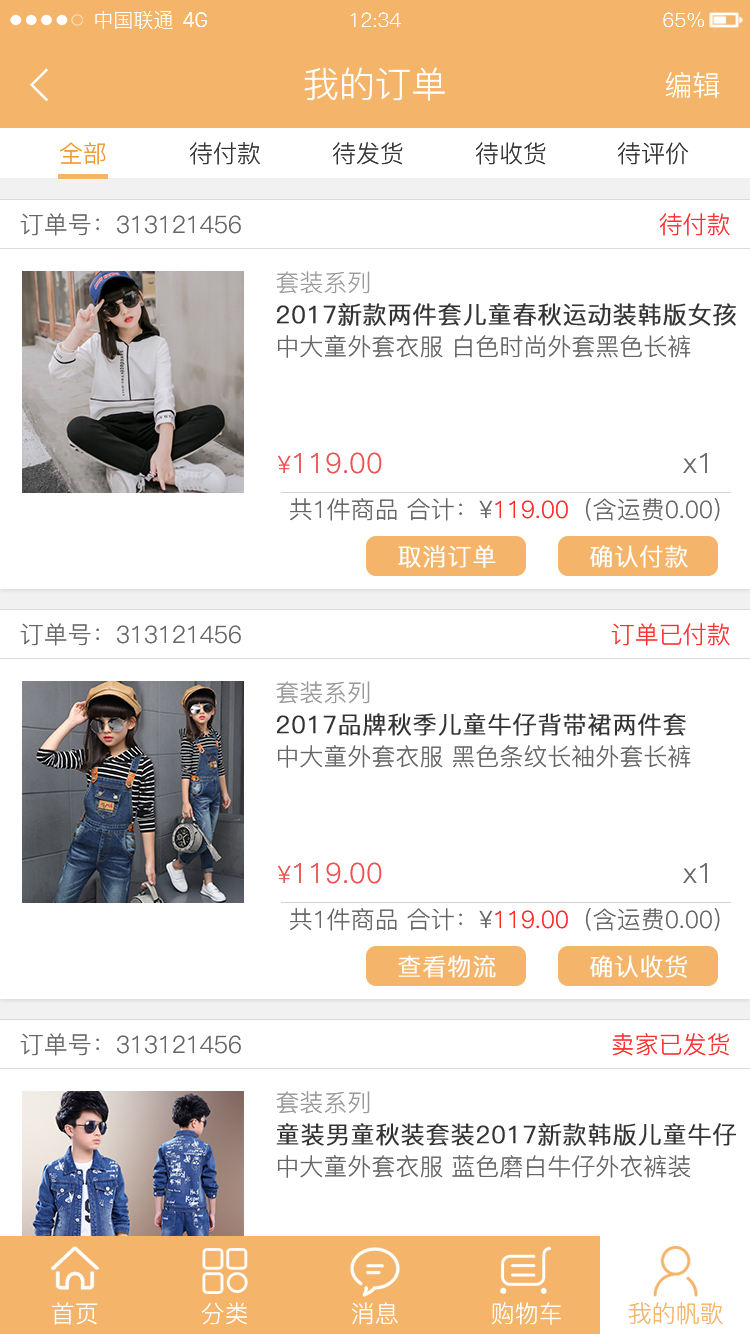
<style>
.page{position:relative;width:750px;height:1334px;background:#ffffff}
.page>*{position:absolute;margin:0}
.t1{font:20px "PingFang-SC-Regular";color:#fefefe}
.t2{font:20px "SanFranciscoDisplay";color:#fefefe}
.t3{font:36px "PingFang-SC-Regular";color:#ffffff}
.t4{font:28px "PingFang-SC-Regular";color:#ffffff}
.t5{font:24px "PingFang-SC-Regular";color:#ee9834}
.t6{font:24px "PingFang-SC-Regular";color:#333333}
.t7{font:24px "PingFang-SC-Regular";color:#666666}
.t8{font:24px "PingFang-SC-Regular";color:#ff2f2f}
.t9{font:24px "PingFang-SC-Regular";color:#999999}
.t10{font:24px "PingFang-SC-Regular";color:#333333;font-weight:bold}
.t11{font:28px "PingFang-SC-Regular";color:#ec5252}
.t12{font:24px "PingFang-SC-Regular";color:#ec5252}
.t13{font:28px "PingFang-SC-Regular";color:#666666}
.t14{font:24px "PingFang-SC-Regular";color:#ff2b2b}
.t15{font:24px "PingFang-SC-Regular";color:#ffffff;font-weight:bold}
.t16{font:24px "PingFang-SC-Regular";color:#fefefe}
.t17{font:24px "PingFang-SC-Regular";color:#f4b469}
</style>
<div class="page">
<p class="t1" style="left:95px;top:11px;width:78px;height:18px">中国联通</p>
<p class="t2" style="left:183px;top:12px;width:24px;height:15px">4G</p>
<p class="t1" style="left:350px;top:12px;width:51px;height:15px">12:34</p>
<p class="t1" style="left:663px;top:12px;width:41px;height:15px">65%</p>
<p class="t3" style="left:304px;top:67px;width:141px;height:34px">我的订单</p>
<p class="t4" style="left:665px;top:72px;width:55px;height:26px">编辑</p>
<p class="t5" style="left:60px;top:142px;width:46px;height:23px">全部</p>
<p class="t6" style="left:190px;top:142px;width:70px;height:23px">待付款</p>
<p class="t6" style="left:333px;top:142px;width:70px;height:23px">待发货</p>
<p class="t6" style="left:476px;top:142px;width:70px;height:23px">待收货</p>
<p class="t6" style="left:618px;top:142px;width:71px;height:23px">待评价</p>
<p class="t7" style="left:20px;top:213px;width:221px;height:23px">订单号：313121456</p>
<p class="t8" style="left:659px;top:213px;width:71px;height:23px">待付款</p>
<p class="t9" style="left:276px;top:271px;width:94px;height:23px">套装系列</p>
<p class="t10" style="left:276px;top:303px;width:460px;height:23px">2017新款两件套儿童春秋运动装韩版女孩</p>
<p class="t7" style="left:278px;top:335px;width:413px;height:23px">中大童外套衣服 白色时尚外套黑色长裤</p>
<p class="t11" style="left:277px;top:452px;width:105px;height:22px"><span class="t12">¥</span>119.00</p>
<p class="t13" style="left:683px;top:453px;width:24px;height:20px">x1</p>
<p class="t7" style="left:290px;top:498px;width:430px;height:23px">共1件商品 合计：¥<span class="t14">119.00</span>（含运费0.00）</p>
<p class="t15" style="left:398px;top:545px;width:98px;height:23px">取消订单</p>
<p class="t15" style="left:590px;top:545px;width:98px;height:23px">确认付款</p>
<p class="t7" style="left:20px;top:623px;width:221px;height:23px">订单号：313121456</p>
<p class="t8" style="left:611px;top:623px;width:119px;height:23px">订单已付款</p>
<p class="t9" style="left:276px;top:681px;width:94px;height:23px">套装系列</p>
<p class="t10" style="left:277px;top:713px;width:409px;height:23px">2017品牌秋季儿童牛仔背带裙两件套</p>
<p class="t7" style="left:278px;top:745px;width:413px;height:23px">中大童外套衣服 黑色条纹长袖外套长裤</p>
<p class="t11" style="left:277px;top:862px;width:105px;height:22px"><span class="t12">¥</span>119.00</p>
<p class="t13" style="left:683px;top:863px;width:24px;height:20px">x1</p>
<p class="t7" style="left:290px;top:908px;width:430px;height:23px">共1件商品 合计：¥<span class="t14">119.00</span>（含运费0.00）</p>
<p class="t15" style="left:398px;top:955px;width:98px;height:23px">查看物流</p>
<p class="t15" style="left:590px;top:955px;width:97px;height:23px">确认收货</p>
<p class="t7" style="left:20px;top:1033px;width:221px;height:23px">订单号：313121456</p>
<p class="t8" style="left:612px;top:1033px;width:117px;height:23px">卖家已发货</p>
<p class="t9" style="left:276px;top:1091px;width:94px;height:23px">套装系列</p>
<p class="t10" style="left:276px;top:1123px;width:460px;height:23px">童装男童秋装套装2017新款韩版儿童牛仔</p>
<p class="t7" style="left:278px;top:1155px;width:413px;height:23px">中大童外套衣服 蓝色磨白牛仔外衣裤装</p>
<p class="t16" style="left:52px;top:1302px;width:46px;height:23px">首页</p>
<p class="t16" style="left:201px;top:1302px;width:47px;height:23px">分类</p>
<p class="t16" style="left:351px;top:1302px;width:47px;height:23px">消息</p>
<p class="t16" style="left:491px;top:1302px;width:70px;height:23px">购物车</p>
<p class="t17" style="left:628px;top:1302px;width:95px;height:23px">我的帆歌</p>
</div>
